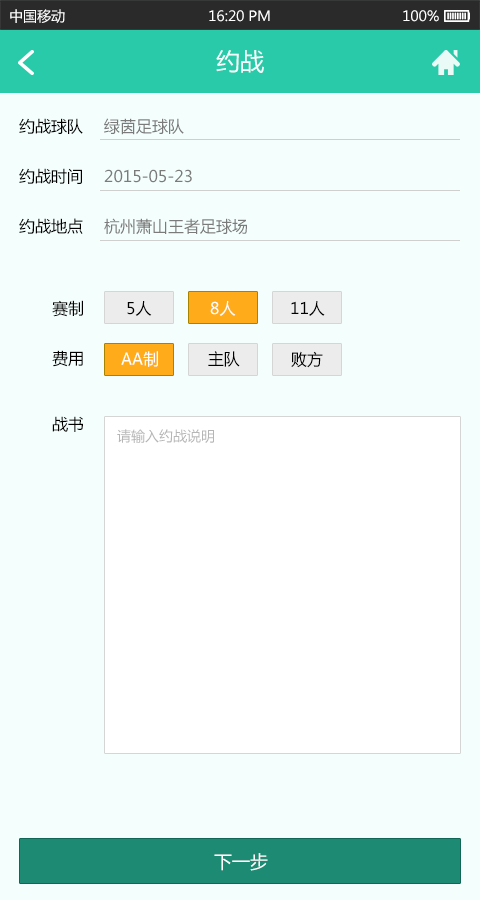
<style>
.page{position:relative;width:480px;height:900px;background:#f4fffd}
.page>*{position:absolute;margin:0}
.t1{font:14px "MicrosoftYaHei";color:#ffffff}
.t2{font:24px "MicrosoftYaHei";color:#f4fffd}
.t3{font:16px/50px "MicrosoftYaHei";color:#000000}
.t4{font:16px "MicrosoftYaHei";color:#7b7b7b}
.t5{font:16px "MicrosoftYaHei";color:#000000}
.t6{font:16px "MicrosoftYaHei";color:#ffffff}
.t7{font:16.2px "MicrosoftYaHei";color:#ffffff}
.t8{font:16.2px "MicrosoftYaHei";color:#000000}
.t9{font:14px "MicrosoftYaHei";color:#b6b6b6}
.t10{font:18px "MicrosoftYaHei";color:#ffffff}
</style>
<div class="page">
<p class="t1" style="left:10px;top:9px;width:55px;height:14px">中国移动</p>
<p class="t1" style="left:209px;top:10px;width:61px;height:12px">16:20 PM</p>
<p class="t1" style="left:403px;top:10px;width:36px;height:12px">100%</p>
<p class="t2" style="left:216px;top:50px;width:48px;height:23px">约战</p>
<p class="t3" style="left:19px;top:118px;width:64px;height:116px">约战球队<br>约战时间<br>约战地点</p>
<p class="t4" style="left:104px;top:118px;width:80px;height:17px">绿茵足球队</p>
<p class="t4" style="left:104px;top:169px;width:88px;height:14px">2015-05-23</p>
<p class="t4" style="left:104px;top:218px;width:143px;height:17px">杭州萧山王者足球场</p>
<p class="t3" style="left:52px;top:300px;width:31px;height:67px">赛制<br>费用</p>
<p class="t5" style="left:127px;top:301px;width:25px;height:15px">5人</p>
<p class="t6" style="left:210px;top:301px;width:26px;height:15px">8人</p>
<p class="t5" style="left:291px;top:301px;width:34px;height:15px">11人</p>
<p class="t7" style="left:121px;top:351px;width:37px;height:16px">AA制</p>
<p class="t8" style="left:208px;top:351px;width:32px;height:16px">主队</p>
<p class="t5" style="left:291px;top:351px;width:32px;height:17px">败方</p>
<p class="t5" style="left:52px;top:416px;width:31px;height:16px">战书</p>
<p class="t9" style="left:117px;top:429px;width:97px;height:14px">请输入约战说明</p>
<p class="t10" style="left:214px;top:853px;width:54px;height:18px">下一步</p>
</div>
